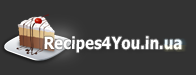
<style>
.page{position:relative;width:196px;height:75px;background:#333333}
.page>*{position:absolute;margin:0}
.t1{font:17.1px "Tahoma-Bold";color:#ffffff;scale:0.88 1}
</style>
<div class="page">
<p class="t1" style="left:44px;top:36px;width:138px;height:17px">Recipes4You.in.ua</p>
</div>
